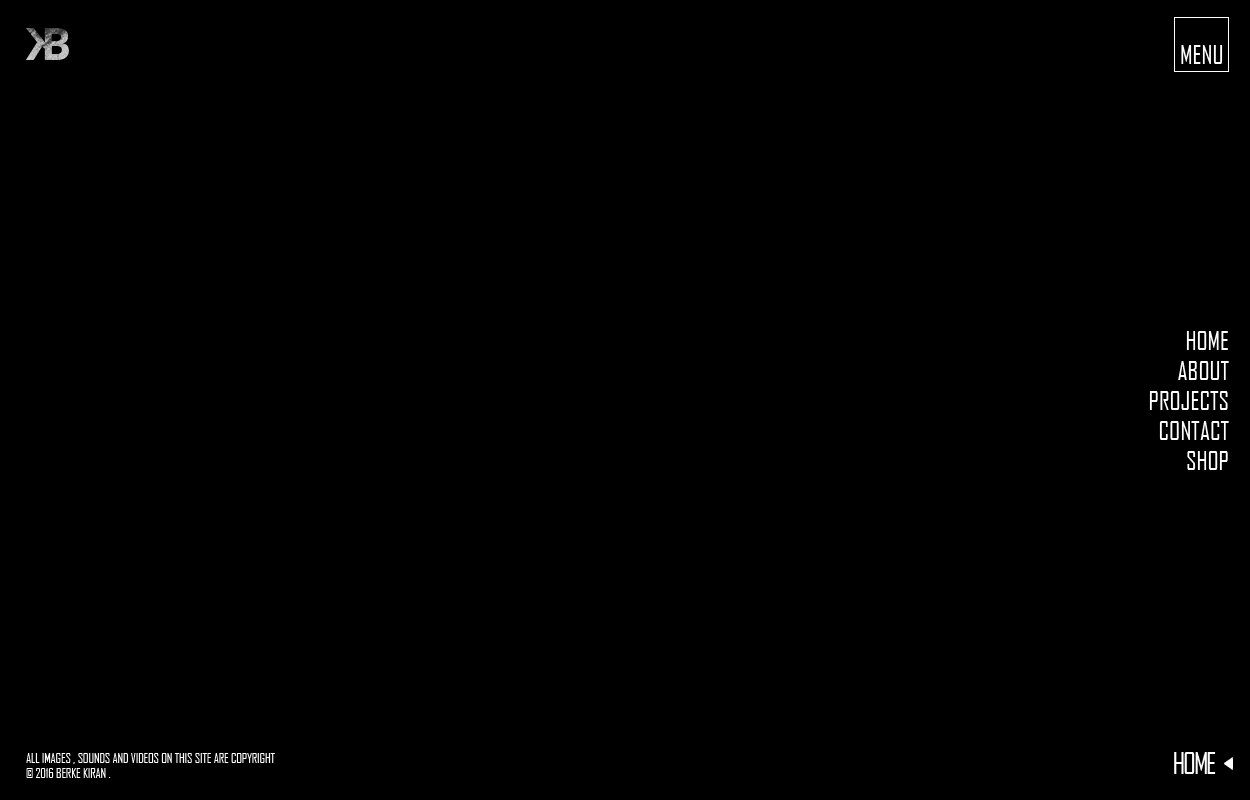
<style>
.page{position:relative;width:1250px;height:800px;background:#000000}
.page>*{position:absolute;margin:0}
.t1{font:25px "AgencyFB-Reg";color:#ffffff}
.t2{font:25px "AgencyFB-Reg";color:#ffffff;text-transform:uppercase}
.t3{font:12.5px "AgencyFB-Reg";color:#ffffff}
.t4{font:12px/30px "AgencyFB-Reg";letter-spacing:-0.075em;color:#ffffff;text-transform:uppercase}
</style>
<div class="page">
<p class="t1" style="left:1181px;top:45px;width:42px;height:19px">MENU</p>
<p class="t2" style="left:1149px;top:331px;width:80px;height:139px;text-align:right">HOME<br>about<br>PROjects<br>contact<br>shop</p>
<p class="t3" style="left:26px;top:753px;width:249px;height:25px">ALL IMAGES , SOUNDS AND VIDEOS ON THIS SITE ARE COPYRIGHT <br>© 2016 BERKE KIRAN .</p>
<p class="t4" style="left:1174px;top:752px;width:42px;height:22px;text-align:center">HOME</p>
</div>
